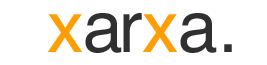
<style>
.page{position:relative;width:267px;height:65px;background:#ffffff}
.page>*{position:absolute;margin:0}
.t1{font:72px "Helvetica";color:#303030}
.t2{font:72px "Helvetica";color:#ff9e04}
.t3{font:72px "Helvetica";letter-spacing:-0.075em;color:#303030}
</style>
<div class="page">
<p class="t1" style="left:47px;top:13px;width:185px;height:40px"><span class="t2">x</span><span class="t3">a</span>r<span class="t2">x</span>a.</p>
</div>
